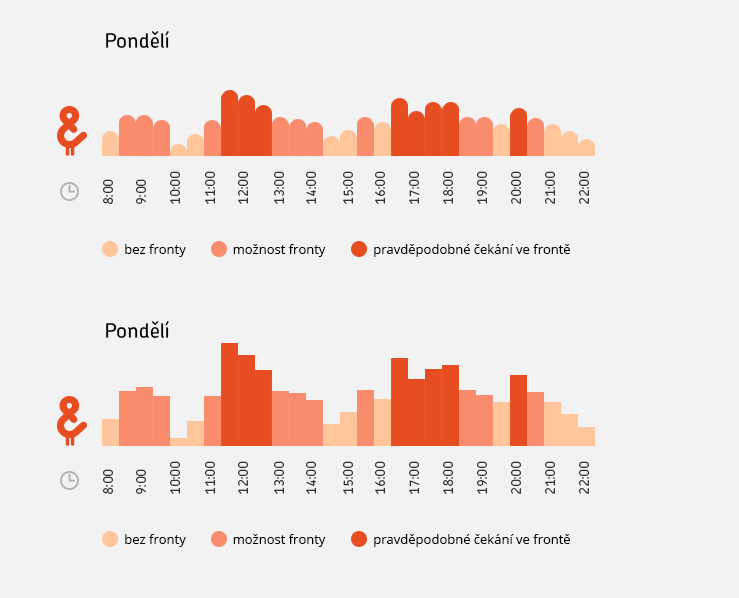
<style>
.page{position:relative;width:739px;height:598px;background:#f2f2f2}
.page>*{position:absolute;margin:0}
.t1{font:21px "ChevinPro-Medium";color:#000000}
.t2{font:13px "ChevinPro-Medium";color:#333333}
.t3{font:13px "OpenSans";color:#000000}
</style>
<div class="page">
<p class="t1" style="left:106px;top:31px;width:63px;height:17px">Pondělí</p>
<p class="t2" style="left:170px;top:171px;width:10px;height:33px;rotate:-90deg">10:00</p>
<p class="t2" style="left:205px;top:171px;width:10px;height:33px;rotate:-90deg">11:00</p>
<p class="t2" style="left:238px;top:171px;width:10px;height:33px;rotate:-90deg">12:00</p>
<p class="t2" style="left:274px;top:171px;width:10px;height:33px;rotate:-90deg">13:00</p>
<p class="t2" style="left:306px;top:171px;width:10px;height:33px;rotate:-90deg">14:00</p>
<p class="t2" style="left:343px;top:171px;width:10px;height:33px;rotate:-90deg">15:00</p>
<p class="t2" style="left:375px;top:171px;width:10px;height:33px;rotate:-90deg">16:00</p>
<p class="t2" style="left:409px;top:171px;width:11px;height:33px;rotate:-90deg">17:00</p>
<p class="t2" style="left:443px;top:171px;width:10px;height:33px;rotate:-90deg">18:00</p>
<p class="t2" style="left:477px;top:171px;width:10px;height:33px;rotate:-90deg">19:00</p>
<p class="t2" style="left:511px;top:171px;width:10px;height:33px;rotate:-90deg">20:00</p>
<p class="t2" style="left:545px;top:171px;width:10px;height:33px;rotate:-90deg">21:00</p>
<p class="t2" style="left:579px;top:171px;width:10px;height:33px;rotate:-90deg">22:00</p>
<p class="t2" style="left:103px;top:179px;width:10px;height:25px;rotate:-90deg">8:00</p>
<p class="t2" style="left:136px;top:179px;width:10px;height:25px;rotate:-90deg">9:00</p>
<p class="t3" style="left:125px;top:244px;width:61px;height:13px">bez fronty</p>
<p class="t3" style="left:233px;top:244px;width:93px;height:13px">možnost fronty</p>
<p class="t3" style="left:374px;top:244px;width:196px;height:13px">pravděpodobné čekání ve frontě</p>
<p class="t1" style="left:106px;top:321px;width:63px;height:17px">Pondělí</p>
<p class="t2" style="left:170px;top:461px;width:10px;height:33px;rotate:-90deg">10:00</p>
<p class="t2" style="left:205px;top:461px;width:10px;height:33px;rotate:-90deg">11:00</p>
<p class="t2" style="left:238px;top:461px;width:10px;height:33px;rotate:-90deg">12:00</p>
<p class="t2" style="left:274px;top:461px;width:10px;height:33px;rotate:-90deg">13:00</p>
<p class="t2" style="left:306px;top:461px;width:10px;height:33px;rotate:-90deg">14:00</p>
<p class="t2" style="left:343px;top:461px;width:10px;height:33px;rotate:-90deg">15:00</p>
<p class="t2" style="left:375px;top:461px;width:10px;height:33px;rotate:-90deg">16:00</p>
<p class="t2" style="left:409px;top:461px;width:11px;height:33px;rotate:-90deg">17:00</p>
<p class="t2" style="left:443px;top:461px;width:10px;height:33px;rotate:-90deg">18:00</p>
<p class="t2" style="left:477px;top:461px;width:10px;height:33px;rotate:-90deg">19:00</p>
<p class="t2" style="left:511px;top:461px;width:10px;height:33px;rotate:-90deg">20:00</p>
<p class="t2" style="left:545px;top:461px;width:10px;height:33px;rotate:-90deg">21:00</p>
<p class="t2" style="left:579px;top:461px;width:10px;height:33px;rotate:-90deg">22:00</p>
<p class="t2" style="left:103px;top:469px;width:10px;height:25px;rotate:-90deg">8:00</p>
<p class="t2" style="left:136px;top:469px;width:10px;height:25px;rotate:-90deg">9:00</p>
<p class="t3" style="left:125px;top:534px;width:61px;height:13px">bez fronty</p>
<p class="t3" style="left:233px;top:534px;width:93px;height:13px">možnost fronty</p>
<p class="t3" style="left:374px;top:534px;width:196px;height:13px">pravděpodobné čekání ve frontě</p>
</div>
